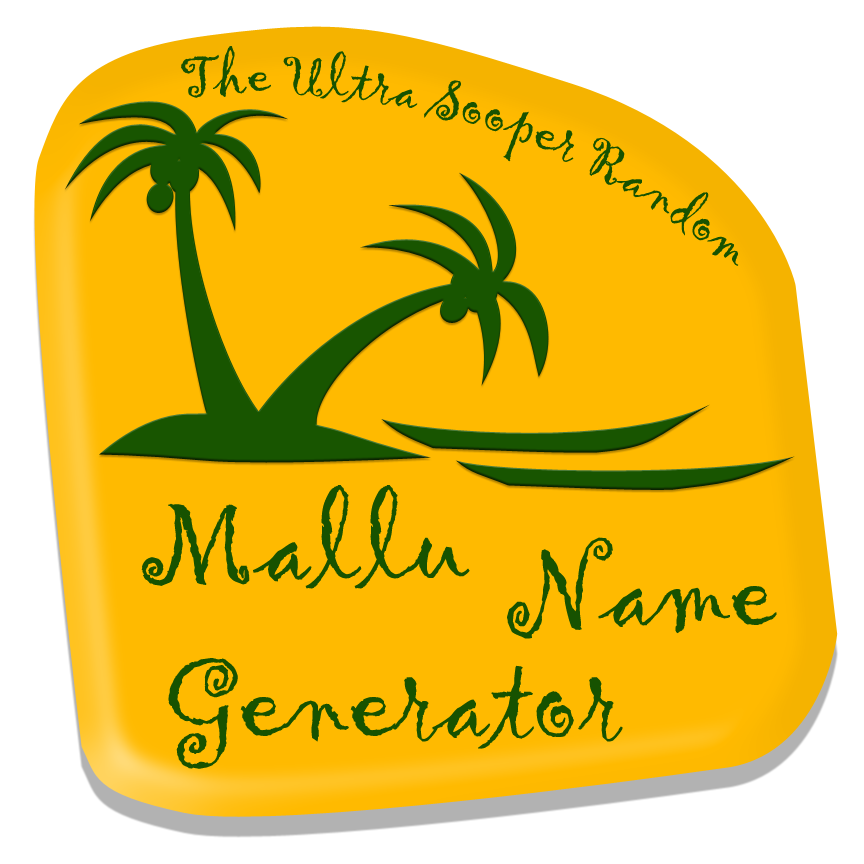
<style>
.page{position:relative;width:864px;height:864px;background:#ffba00}
.page>*{position:absolute;margin:0}
.t1{font:56.4px "Gigi-Regular";color:#175200}
.t2{font:118.8px "Gigi-Regular";color:#175200;font-weight:bold}
.t3{font:118.8px "Gigi-Regular";color:#175200}
</style>
<div class="page">
<p class="t1" style="left:181px;top:46px;width:558px;height:220px;rotate:17deg">The Ultra Sooper Random</p>
<p class="t2" style="left:141px;top:485px;width:329px;height:104px">Mallu</p>
<p class="t3" style="left:507px;top:537px;width:270px;height:102px">Name</p>
<p class="t3" style="left:168px;top:658px;width:455px;height:111px">Generator</p>
</div>
